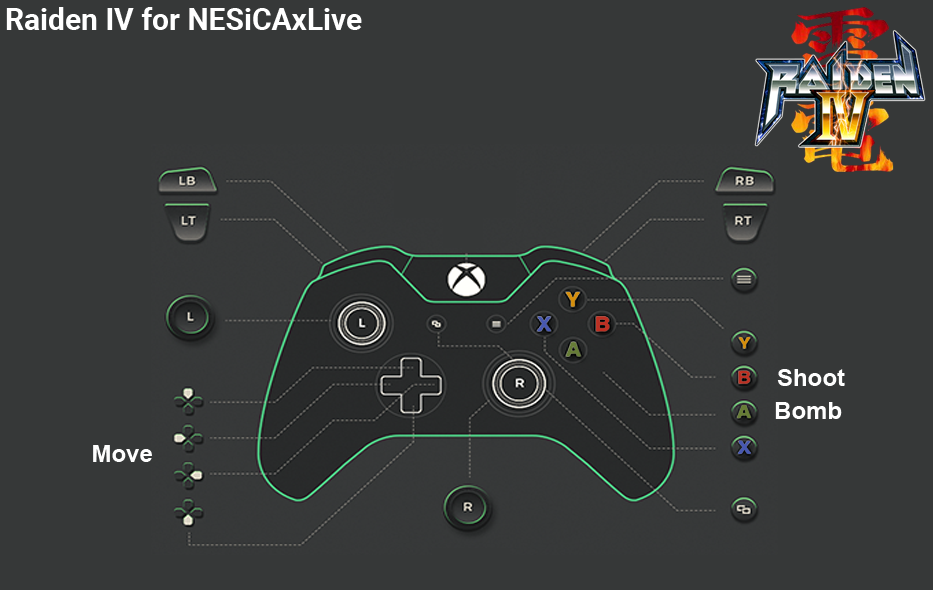
<style>
.page{position:relative;width:933px;height:590px;background:#363838}
.page>*{position:absolute;margin:0}
.t1{font:30px "Roboto-Bold";color:#ffffff}
.t2{font:24px "Arial-BoldMT";color:#fefefe}
</style>
<div class="page">
<p class="t1" style="left:6px;top:7px;width:356px;height:23px">Raiden IV for NESiCAxLive</p>
<p class="t2" style="left:777px;top:369px;width:68px;height:17px">Shoot</p>
<p class="t2" style="left:775px;top:402px;width:67px;height:17px">Bomb</p>
<p class="t2" style="left:93px;top:445px;width:59px;height:17px">Move</p>
</div>
